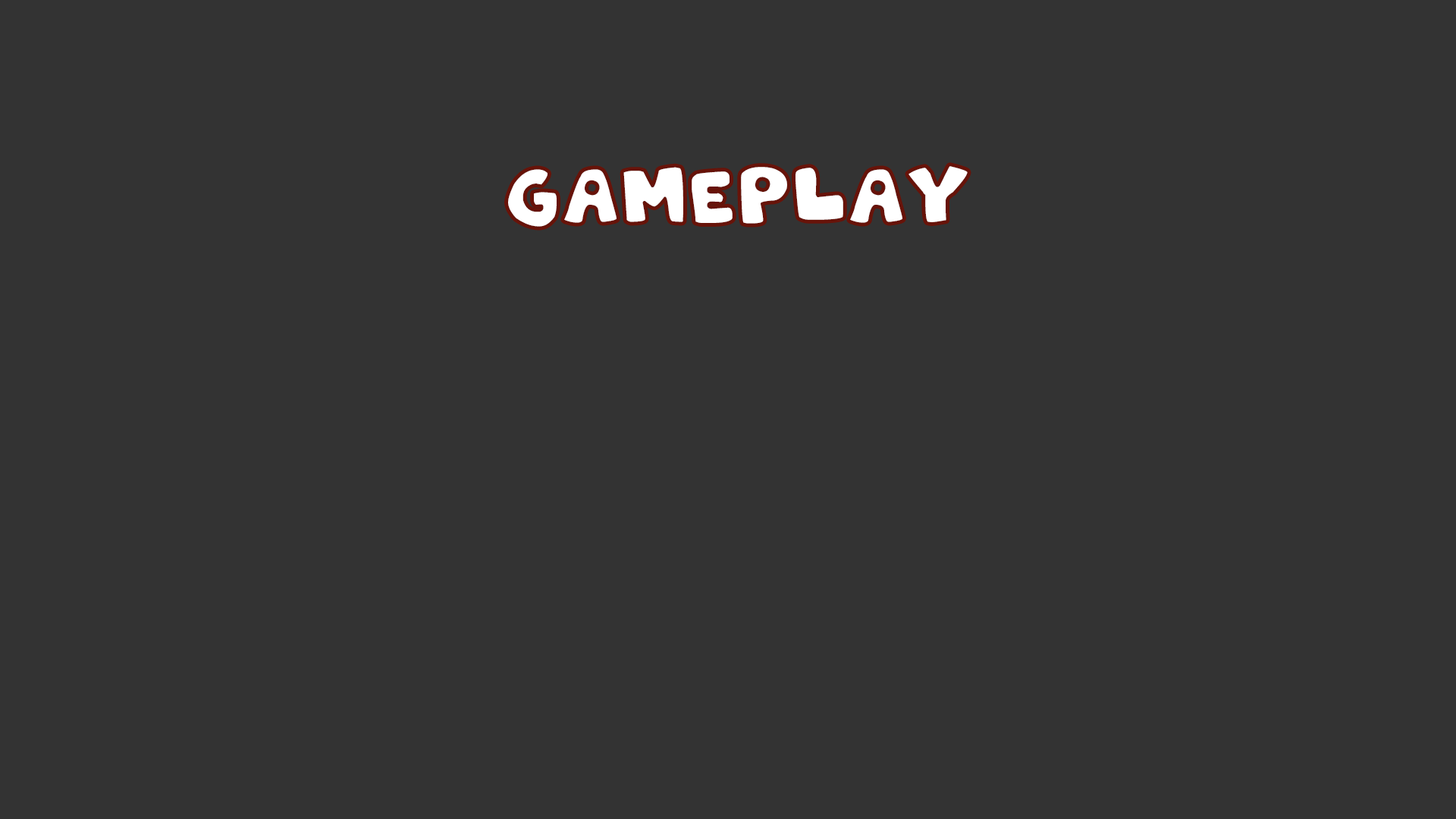
<style>
.page{position:relative;width:1456px;height:819px;background:#333333}
.page>*{position:absolute;margin:0}
.t1{font:36.4px "PatchworkStitchlingsColor";letter-spacing:-0.025em;color:#ffffff}
</style>
<div class="page">
<p class="t1" style="left:508px;top:166px;width:460px;height:61px">gameplay</p>
</div>
